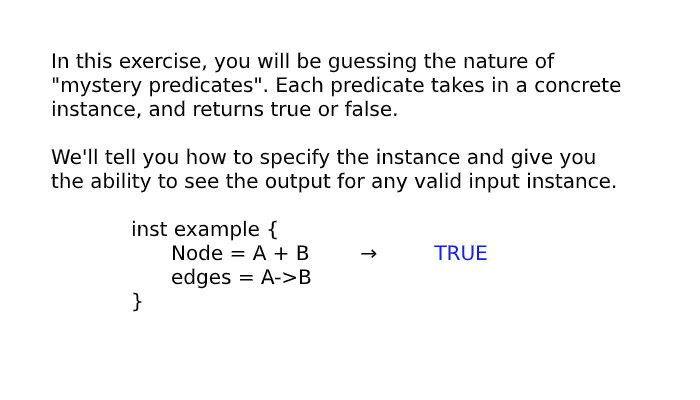
<style>
.page{position:relative;width:700px;height:400px;background:#ffffff}
.page>*{position:absolute;margin:0}
.t1{font:20px "DejaVuSans";color:#000000}
.t2{font:20px "DejaVuSans";color:#181cf0}
</style>
<div class="page">
<p class="t1" style="left:51px;top:52px;width:570px;height:260px">In this exercise, you will be guessing the nature of <br>"mystery predicates". Each predicate takes in a concrete <br>instance, and returns true or false. <br><br>We'll tell you how to specify the instance and give you <br>the ability to see the output for any valid input instance.<br><br>  inst example {<br>   Node = A + B        →         <span class="t2">TRUE<br>   </span>edges = A-&gt;B <br>  }</p>
</div>
